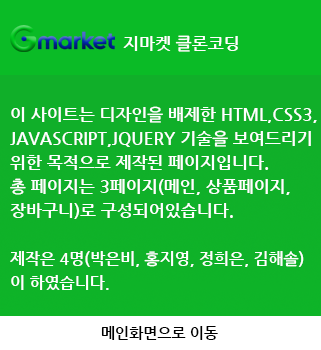
<style>
.page{position:relative;width:321px;height:350px;background:#0abb26}
.page>*{position:absolute;margin:0}
.t1{font:17px "NanumGothicBold";color:#ffffff}
.t2{font:17px/24px "NanumGothicBold";color:#ffffff}
.t3{font:16px/24px "NanumGothicBold";color:#ffffff}
.t4{font:15px "NanumGothicBold";color:#000000}
</style>
<div class="page">
<p class="t1" style="left:123px;top:35px;width:115px;height:17px">지마켓 클론코딩</p>
<p class="t2" style="left:10px;top:106px;width:307px;height:184px">이 사이트는 디자인을 배제한 HTML,CSS3,<br>JAVASCRIPT,JQUERY 기술을 보여드리기 <br>위한 목적으로 제작된 페이지입니다.<br>총 페이지는 3페이지(메인, 상품페이지, <br>장바구니)로 구성되어있습니다.<br><br><span class="t3">제작은 4명(박은비, 홍지영, 정희은, 김해솔)<br>이 하였습니다.</span></p>
<p class="t4" style="left:101px;top:326px;width:117px;height:14px">메인화면으로 이동</p>
</div>
